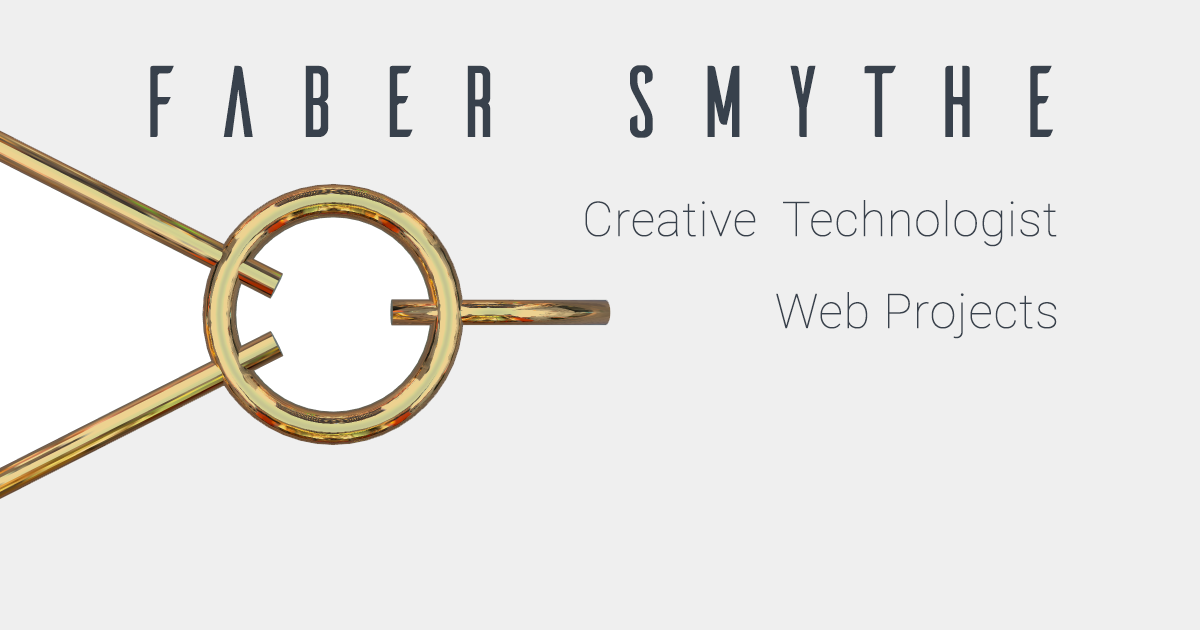
<style>
.page{position:relative;width:1200px;height:630px;background:#efefef}
.page>*{position:absolute;margin:0}
.t1{font:101.3px "Ailerons-Regular";letter-spacing:0.2em;color:#38414c}
.t2{font:48px "Roboto-Thin";letter-spacing:0.02em;color:#38414c}
</style>
<div class="page">
<p class="t1" style="left:150px;top:65px;width:903px;height:73px">FABER SMYTHE</p>
<p class="t2" style="left:585px;top:200px;width:472px;height:47px">Creative  Technologist</p>
<p class="t2" style="left:776px;top:292px;width:281px;height:47px">Web Projects</p>
</div>
